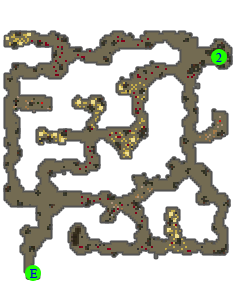
<style>
.page{position:relative;width:236px;height:281px;background:#ffffff}
.page>*{position:absolute;margin:0}
.t1{font:20px "TimesNewRomanPSMT";color:#0101dd}
</style>
<div class="page">
<p class="t1" style="left:216px;top:53px;width:6px;height:9px">2</p>
<p class="t1" style="left:30px;top:269px;width:8px;height:9px">E</p>
</div>
